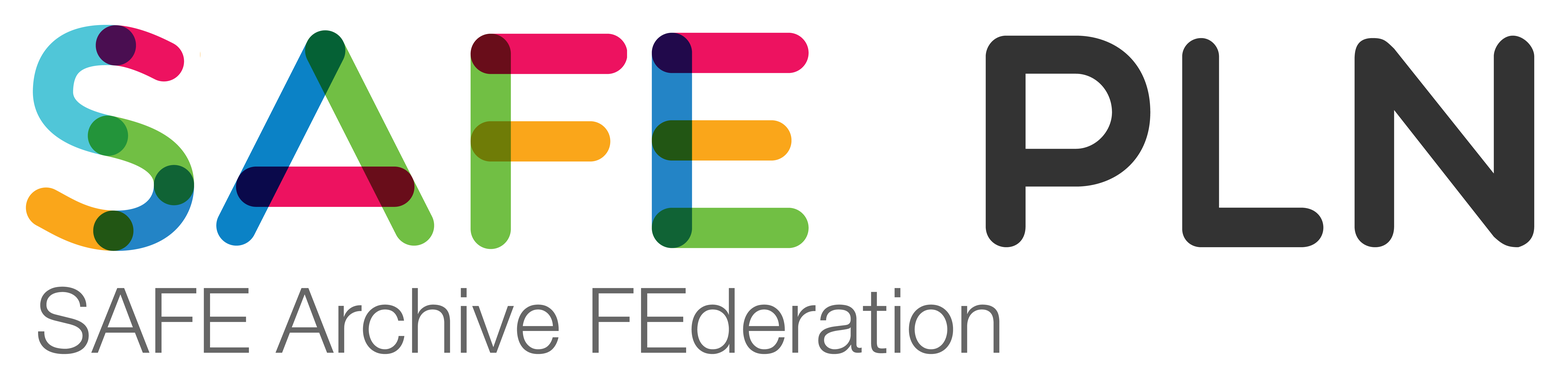
<style>
.page{position:relative;width:1568px;height:372px;background:#ffffff}
.page>*{position:absolute;margin:0}
.t1{font:301.4px "Multicolore";color:#333333}
.t2{font:90.4px "HelveticaNeue-Light";color:#666666}
</style>
<div class="page">
<p class="t1" style="left:986px;top:35px;width:548px;height:212px">PLN</p>
<p class="t2" style="left:38px;top:286px;width:962px;height:68px">SAFE Archive FEderation</p>
</div>
